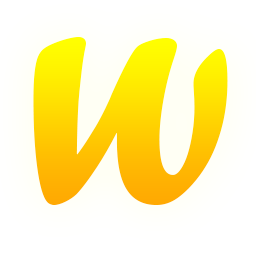
<style>
.page{position:relative;width:256px;height:256px}
.page>*{position:absolute;margin:0}
.t1{font:249.7px "ForteMT"}
</style>
<div class="page">
<p class="t1" style="left:33px;top:36px;width:195px;height:169px">W</p>
</div>
